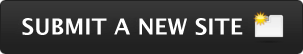
<style>
.page{position:relative;width:303px;height:54px;background:#212121}
.page>*{position:absolute;margin:0}
.t1{font:22px "LucidaGrande-Bold";color:#ffffff}
</style>
<div class="page">
<p class="t1" style="left:22px;top:18px;width:221px;height:17px">SUBMIT A NEW SITE</p>
</div>
